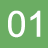
<style>
.page{position:relative;width:48px;height:48px;background:#6bad63}
.page>*{position:absolute;margin:0}
.t1{font:36px "ArialMT";color:#ffffff}
</style>
<div class="page">
<p class="t1" style="left:8px;top:10px;width:33px;height:28px">01</p>
</div>
